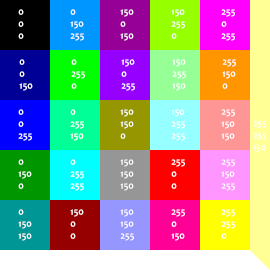
<style>
.page{position:relative;width:270px;height:270px}
.page>*{position:absolute;margin:0}
.t1{font:10px "Candara-Bold";color:#ffffff}
</style>
<div class="page">
<p class="t1" style="left:18px;top:9px;width:6px;height:30px">0<br>0<br>0</p>
<p class="t1" style="left:70px;top:9px;width:14px;height:32px">0<br>150<br>255</p>
<p class="t1" style="left:120px;top:9px;width:14px;height:32px">150<br>0<br>150</p>
<p class="t1" style="left:171px;top:9px;width:14px;height:30px">150<br>255<br>0</p>
<p class="t1" style="left:221px;top:9px;width:14px;height:32px">255<br>0<br>255</p>
<p class="t1" style="left:19px;top:59px;width:14px;height:32px">0<br>0<br>150</p>
<p class="t1" style="left:71px;top:59px;width:14px;height:30px">0<br>255<br>0</p>
<p class="t1" style="left:121px;top:59px;width:14px;height:32px">150<br>0<br>255</p>
<p class="t1" style="left:172px;top:59px;width:14px;height:32px">150<br>255<br>150</p>
<p class="t1" style="left:222px;top:59px;width:14px;height:30px">255<br>150<br>0</p>
<p class="t1" style="left:18px;top:109px;width:14px;height:32px">0<br>0<br>255</p>
<p class="t1" style="left:70px;top:109px;width:14px;height:32px">0<br>255<br>150</p>
<p class="t1" style="left:120px;top:109px;width:14px;height:30px">150<br>150<br>0</p>
<p class="t1" style="left:171px;top:109px;width:14px;height:32px">150<br>255<br>255</p>
<p class="t1" style="left:221px;top:109px;width:14px;height:32px">255<br>150<br>150</p>
<p class="t1" style="left:253px;top:121px;width:13px;height:31px">255<br>255<br>150</p>
<p class="t1" style="left:18px;top:159px;width:14px;height:30px">0<br>150<br>0</p>
<p class="t1" style="left:70px;top:159px;width:14px;height:32px">0<br>255<br>255</p>
<p class="t1" style="left:120px;top:159px;width:14px;height:32px">150<br>150<br>150</p>
<p class="t1" style="left:171px;top:159px;width:14px;height:30px">255<br>0<br>0</p>
<p class="t1" style="left:221px;top:159px;width:14px;height:32px">255<br>150<br>255</p>
<p class="t1" style="left:18px;top:209px;width:14px;height:32px">0<br>150<br>150</p>
<p class="t1" style="left:70px;top:209px;width:14px;height:30px">150<br>0<br>0</p>
<p class="t1" style="left:120px;top:209px;width:14px;height:32px">150<br>150<br>255</p>
<p class="t1" style="left:171px;top:209px;width:14px;height:32px">255<br>0<br>150</p>
<p class="t1" style="left:221px;top:209px;width:14px;height:30px">255<br>255<br>0</p>
</div>
